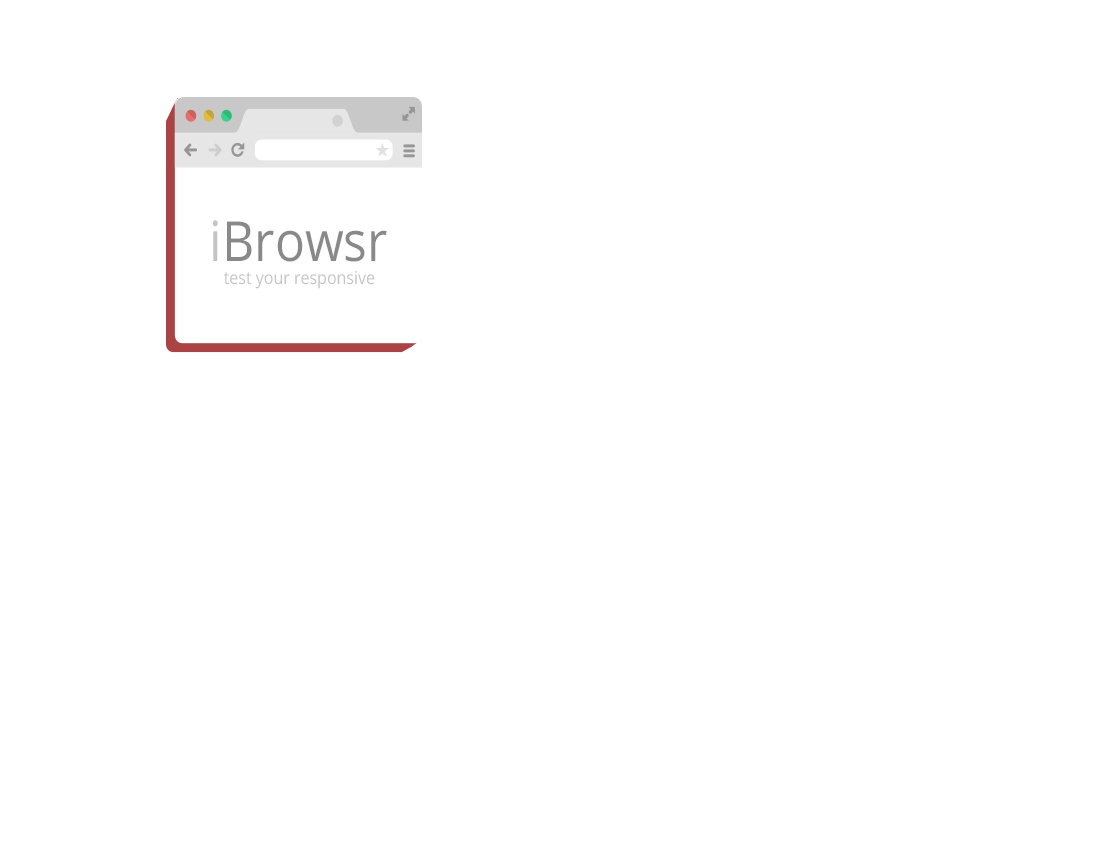
<style>
.page{position:relative;width:1120px;height:850px;background:#ffffff}
.page>*{position:absolute;margin:0}
.t1{font:55.4px "OpenSans";color:#898989;scale:0.9 1}
.t2{font:55.4px "OpenSans";color:#c4c4c4;scale:0.9 1}
.t3{font:17.8px "OpenSans";color:#c4c4c4;scale:0.9 1}
</style>
<div class="page">
<p class="t1" style="left:213px;top:220px;width:174px;height:42px"><span class="t2">i</span>Browsr</p>
<p class="t3" style="left:224px;top:271px;width:151px;height:18px">test your responsive</p>
</div>
